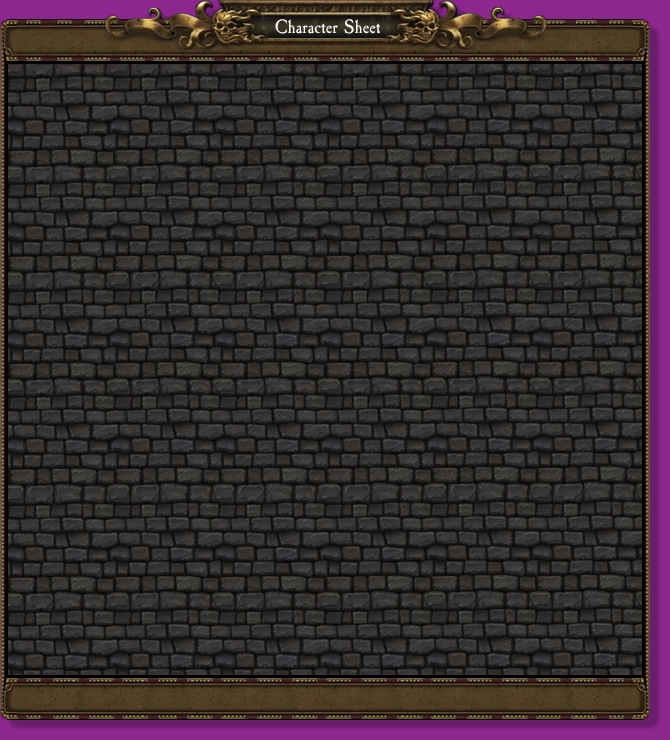
<style>
.page{position:relative;width:670px;height:740px}
.page>*{position:absolute;margin:0}
.t1{font:20px "CaslonAntique";color:#f7f7f7}
</style>
<div class="page">
<p class="t1" style="left:275px;top:19px;width:105px;height:15px">Character Sheet</p>
</div>
